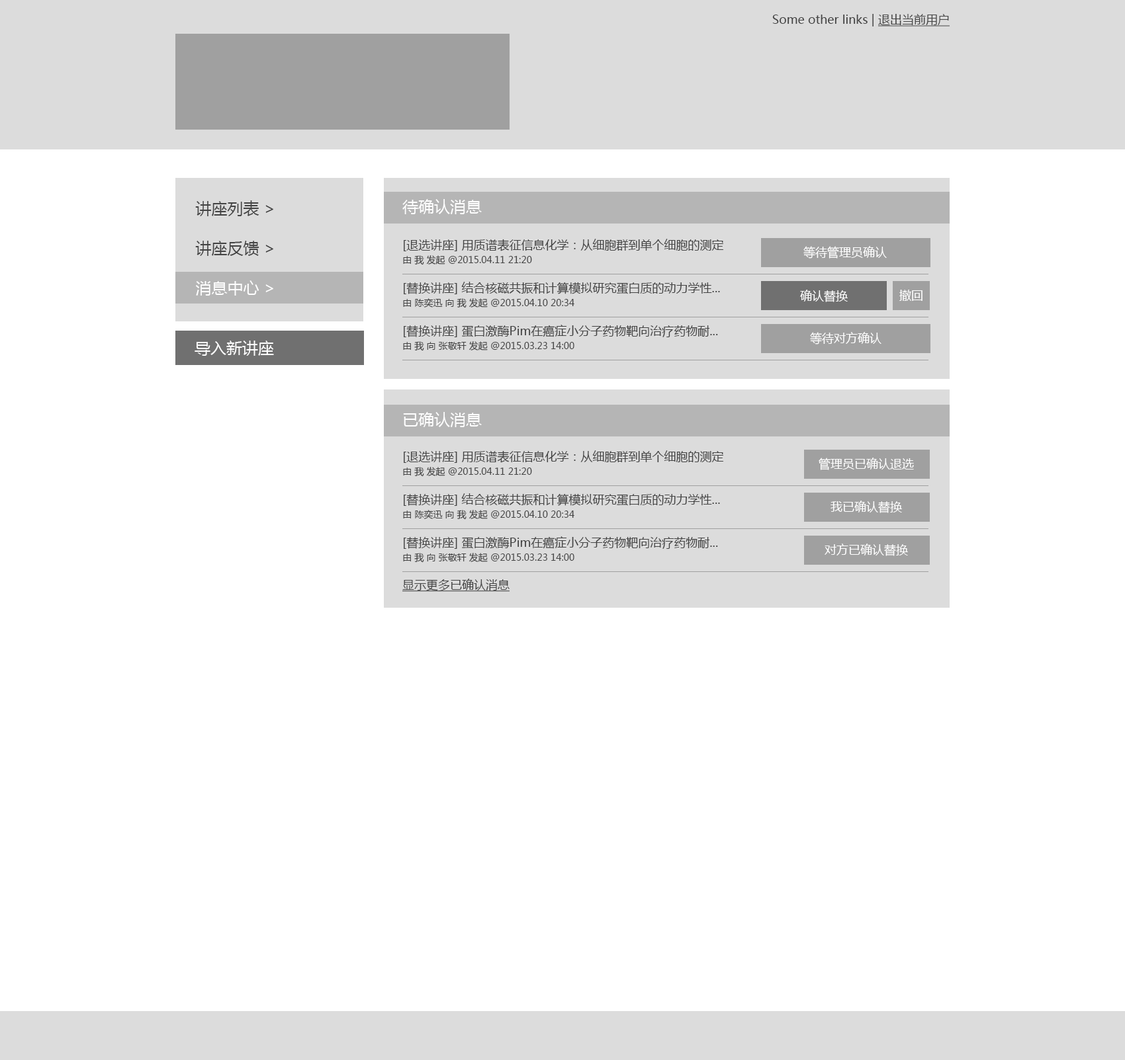
<style>
.page{position:relative;width:1125px;height:1060px;background:#ffffff}
.page>*{position:absolute;margin:0}
.t1{font:11.9px "MicrosoftYaHei";color:#434343}
.t2{font:11.9px "MicrosoftYaHei";color:#434343;text-decoration:underline}
.t3{font:15.9px/39.7px "MicrosoftYaHei";color:#434343}
.t4{font:15.9px/39.7px "MicrosoftYaHei";color:#ffffff}
.t5{font:15.9px "MicrosoftYaHei";color:#ffffff}
.t6{font:11.9px/15.9px "MicrosoftYaHei";color:#434343}
.t7{font:9.3px/15.9px "MicrosoftYaHei";color:#434343}
.t8{font:11.9px "MicrosoftYaHei";color:#ffffff}
</style>
<div class="page">
<p class="t1" style="left:772px;top:14px;width:177px;height:12px">Some other links | <span class="t2">退出当前用户</span></p>
<p class="t3" style="left:195px;top:200px;width:78px;height:96px">讲座列表 &gt;<br>讲座反馈 &gt;<br><span class="t4">消息中心 &gt;</span></p>
<p class="t5" style="left:402px;top:199px;width:80px;height:15px">待确认消息</p>
<p class="t6" style="left:403px;top:239px;width:321px;height:26px">[退选讲座] 用质谱表征信息化学：从细胞群到单个细胞的测定<br><span class="t7">由 我 发起 @2015.04.11 21:20</span></p>
<p class="t8" style="left:803px;top:246px;width:83px;height:13px">等待管理员确认</p>
<p class="t6" style="left:403px;top:282px;width:317px;height:26px">[替换讲座] 结合核磁共振和计算模拟研究蛋白质的动力学性...<br><span class="t7">由 陈奕迅 向 我 发起 @2015.04.10 20:34</span></p>
<p class="t8" style="left:800px;top:290px;width:47px;height:12px">确认替换</p>
<p class="t8" style="left:899px;top:290px;width:23px;height:11px">撤回</p>
<p class="t6" style="left:403px;top:325px;width:315px;height:26px">[替换讲座] 蛋白激酶Pim在癌症小分子药物靶向治疗药物耐...<br><span class="t7">由 我 向 张敬轩 发起 @2015.03.23 14:00</span></p>
<p class="t5" style="left:194px;top:341px;width:80px;height:15px">导入新讲座</p>
<p class="t8" style="left:810px;top:332px;width:71px;height:13px">等待对方确认</p>
<p class="t5" style="left:403px;top:412px;width:79px;height:15px">已确认消息</p>
<p class="t6" style="left:403px;top:450px;width:321px;height:27px">[退选讲座] 用质谱表征信息化学：从细胞群到单个细胞的测定<br><span class="t7">由 我 发起 @2015.04.11 21:20</span></p>
<p class="t8" style="left:818px;top:458px;width:96px;height:12px">管理员已确认退选</p>
<p class="t6" style="left:403px;top:493px;width:317px;height:27px">[替换讲座] 结合核磁共振和计算模拟研究蛋白质的动力学性...<br><span class="t7">由 陈奕迅 向 我 发起 @2015.04.10 20:34</span></p>
<p class="t8" style="left:830px;top:501px;width:72px;height:12px">我已确认替换</p>
<p class="t6" style="left:403px;top:536px;width:315px;height:27px">[替换讲座] 蛋白激酶Pim在癌症小分子药物靶向治疗药物耐...<br><span class="t7">由 我 向 张敬轩 发起 @2015.03.23 14:00</span></p>
<p class="t8" style="left:824px;top:544px;width:84px;height:12px">对方已确认替换</p>
<p class="t2" style="left:402px;top:579px;width:107px;height:13px">显示更多已确认消息</p>
</div>
